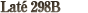
<style>
.page{position:relative;width:88px;height:13px;background:#ffffff}
.page>*{position:absolute;margin:0}
.t1{font:15px "RyuminPro-ExBold";letter-spacing:-0.06em;color:#4a3f32;font-weight:bold;scale:0.9 1}
</style>
<div class="page">
<p class="t1" style="left:0px;top:0px;width:61px;height:13px">Laté 298B</p>
</div>
